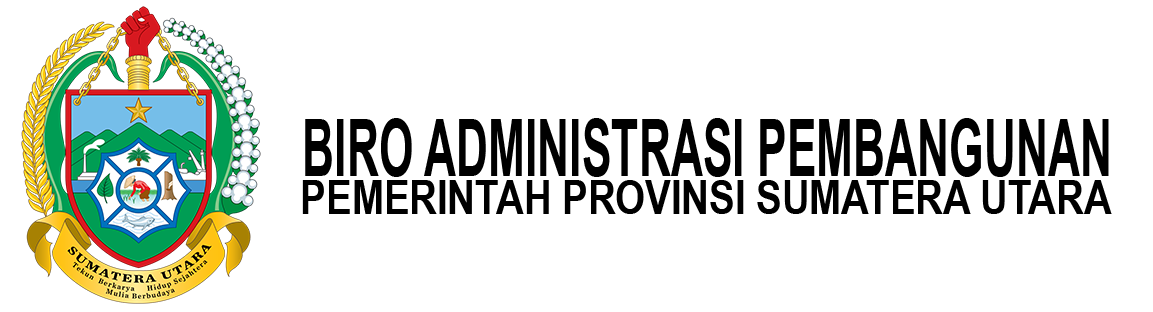
<style>
.page{position:relative;width:1153px;height:312px;background:#ffffff}
.page>*{position:absolute;margin:0}
.t1{font:78.5px "ArialNarrow-Bold";color:#000000;scale:0.69 1}
.t2{font:46.8px "ArialNarrow-Bold";color:#000000}
</style>
<div class="page">
<p class="t1" style="left:305px;top:118px;width:804px;height:59px">BIRO ADMINISTRASI PEMBANGUNAN</p>
<p class="t2" style="left:302px;top:180px;width:810px;height:34px">PEMERINTAH PROVINSI SUMATERA UTARA</p>
</div>
